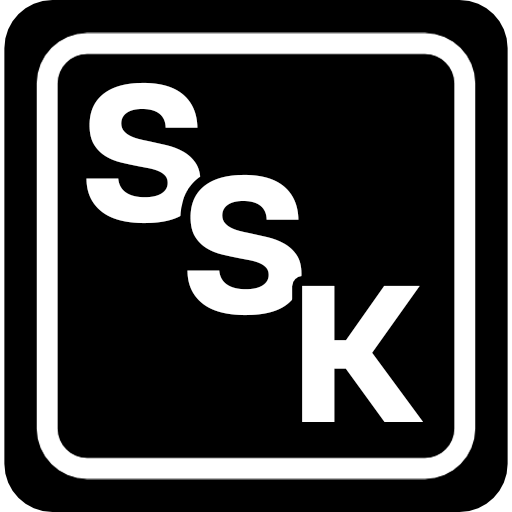
<style>
.page{position:relative;width:512px;height:512px;background:#000000}
.page>*{position:absolute;margin:0}
.t1{font:203.3px "AltoneTrial-Bold";letter-spacing:0.015em;color:#ffffff}
</style>
<div class="page">
<p class="t1" style="left:86px;top:82px;width:115px;height:142px">S</p>
<p class="t1" style="left:187px;top:174px;width:115px;height:142px">S</p>
<p class="t1" style="left:302px;top:285px;width:121px;height:137px">K</p>
</div>
